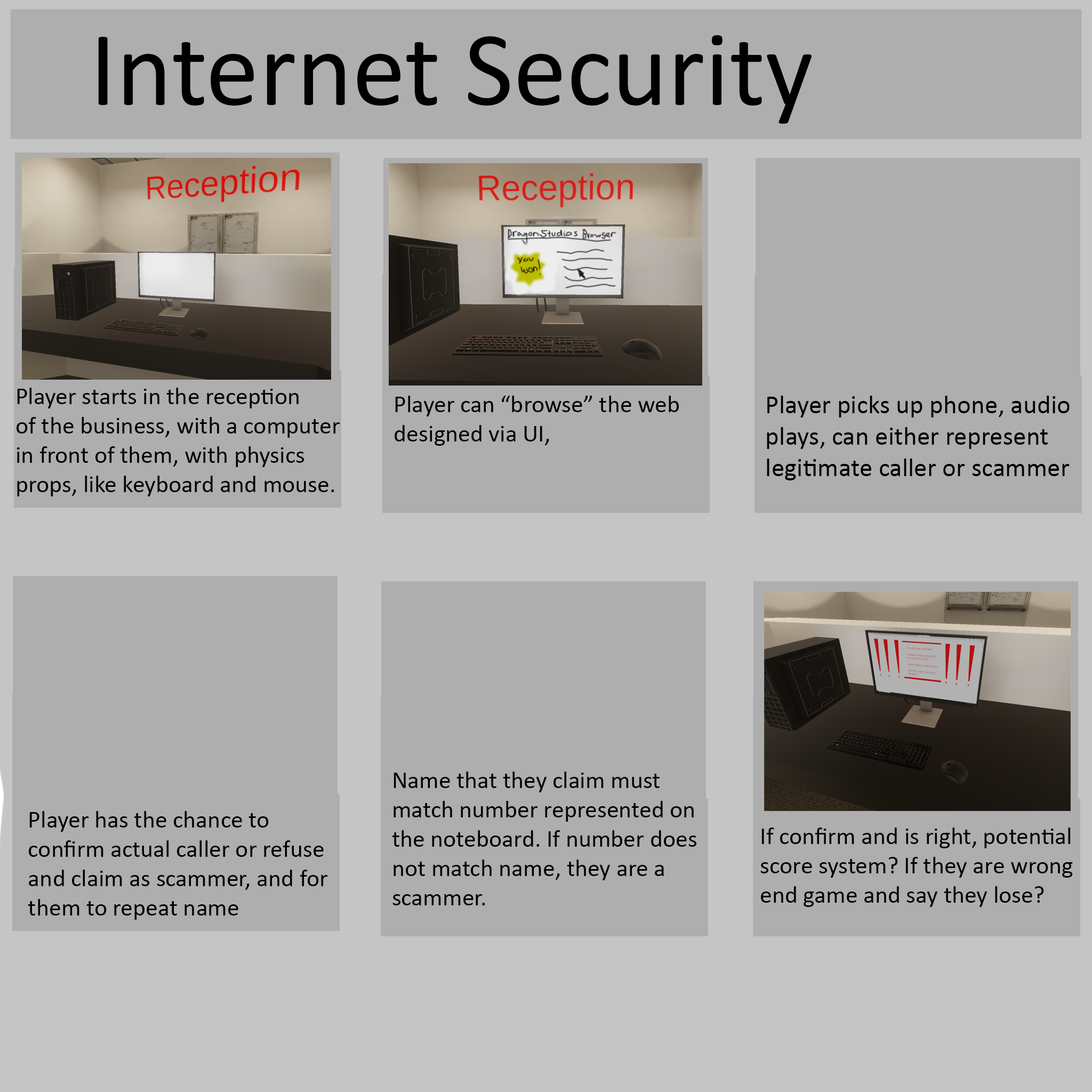
<style>
.page{position:relative;width:1092px;height:1092px;background:#aeaeae}
.page>*{position:absolute;margin:0}
.t1{font:106.6px "Calibri";color:#000000}
.t2{font:24.4px "Calibri";color:#000000}
.t3{font:26.3px "Calibri";color:#000000}
</style>
<div class="page">
<p class="t1" style="left:98px;top:35px;width:714px;height:89px">Internet Security</p>
<p class="t2" style="left:17px;top:388px;width:323px;height:108px">Player starts in the reception<br>of the business, with a computer<br>in front of them, with physics<br>props, like keyboard and mouse.</p>
<p class="t2" style="left:395px;top:396px;width:284px;height:50px">Player can “browse” the web<br>designed via UI,</p>
<p class="t3" style="left:767px;top:396px;width:303px;height:84px">Player picks up phone, audio<br>plays, can either represent<br>legitimate caller or scammer</p>
<p class="t2" style="left:392px;top:772px;width:305px;height:133px">Name that they claim must<br>match number represented on<br>the noteboard. If number does<br>not match name, they are a<br>scammer.</p>
<p class="t2" style="left:28px;top:811px;width:300px;height:109px">Player has the chance to<br>confirm actual caller or refuse<br>and claim as scammer, and for<br>them to repeat name</p>
<p class="t2" style="left:760px;top:828px;width:313px;height:79px">If confirm and is right, potential<br>score system? If they are wrong<br>end game and say they lose?</p>
</div>
